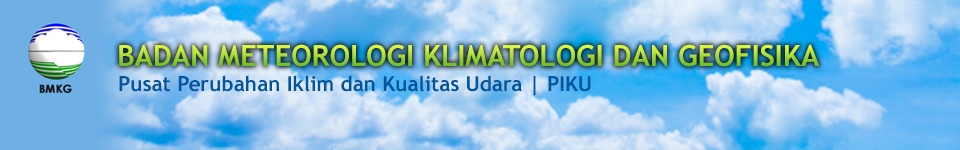
<style>
.page{position:relative;width:960px;height:150px}
.page>*{position:absolute;margin:0}
.t1{font:29.2px "TrebuchetMS-Bold"}
.t2{font:20.8px "TrebuchetMS-Bold";color:#00569d}
</style>
<div class="page">
<p class="t1" style="left:119px;top:44px;width:701px;height:23px">BADAN METEOROLOGI KLIMATOLOGI DAN GEOFISIKA</p>
<p class="t2" style="left:119px;top:75px;width:472px;height:21px">Pusat Perubahan Iklim dan Kualitas Udara | PIKU</p>
</div>
